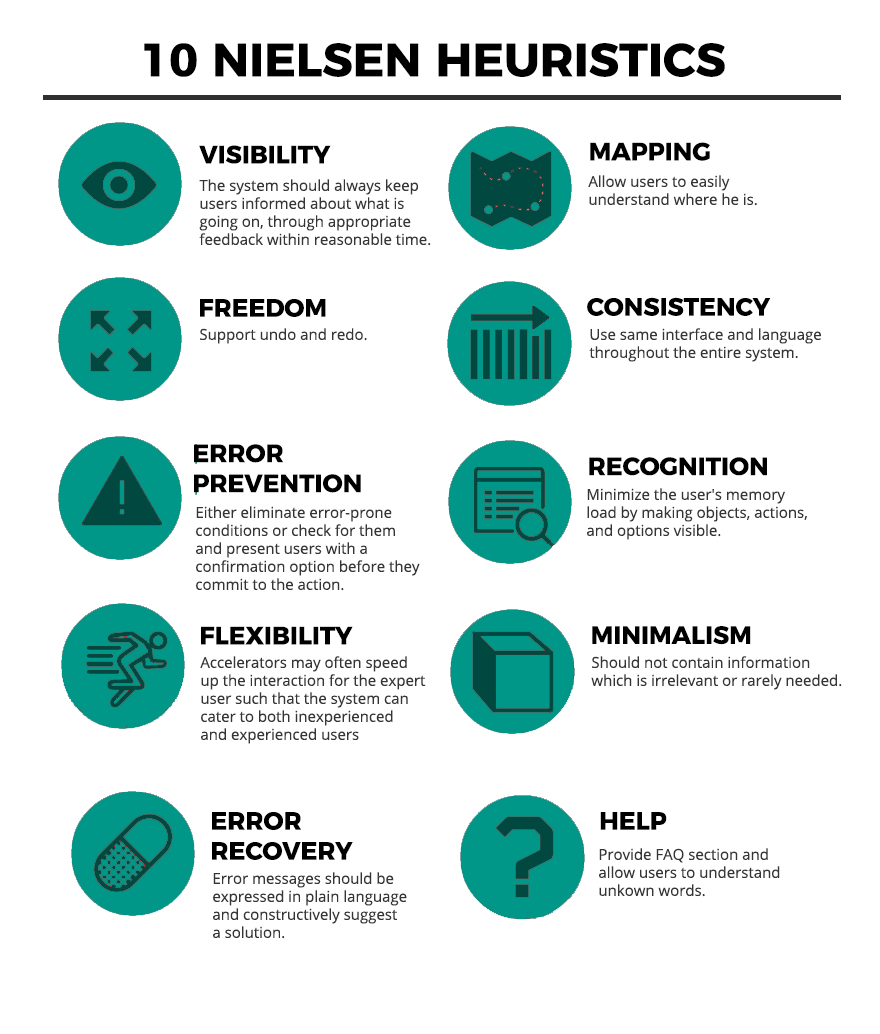
<style>
.page{position:relative;width:880px;height:1034px;background:#ffffff}
.page>*{position:absolute;margin:0}
.t1{font:47px "Montserrat-Bold";color:#000000}
.t2{font:25px "Montserrat-Bold";color:#000000}
.t3{font:15px/18px "OpenSans";color:#353535}
.t4{font:15px "OpenSans";color:#353535}
</style>
<div class="page">
<p class="t1" style="left:144px;top:43px;width:581px;height:34px">10 NIELSEN HEURISTICS</p>
<p class="t2" style="left:199px;top:145px;width:132px;height:19px">VISIBILITY</p>
<p class="t2" style="left:590px;top:142px;width:120px;height:19px">MAPPING</p>
<p class="t3" style="left:199px;top:179px;width:232px;height:67px">The system should always keep <br>users informed about what is <br>going on, through appropriate <br>feedback within reasonable time.</p>
<p class="t3" style="left:588px;top:175px;width:169px;height:31px">Allow users to easily <br>understand where he is.</p>
<p class="t2" style="left:200px;top:299px;width:126px;height:18px">FREEDOM</p>
<p class="t2" style="left:587px;top:297px;width:184px;height:19px">CONSISTENCY</p>
<p class="t4" style="left:200px;top:328px;width:167px;height:16px">Support undo and redo.</p>
<p class="t3" style="left:589px;top:328px;width:232px;height:34px">Use same interface and language <br>throughout the entire system.</p>
<p class="t2" style="left:194px;top:444px;width:167px;height:49px">ERROR <br>PREVENTION</p>
<p class="t2" style="left:589px;top:457px;width:178px;height:19px">RECOGNITION</p>
<p class="t3" style="left:587px;top:488px;width:220px;height:52px">Minimize the user's memory <br>load by making objects, actions, <br>and options visible.</p>
<p class="t3" style="left:196px;top:506px;width:224px;height:85px">Either eliminate error-prone <br>conditions or check for them <br>and present users with a <br>confirmation option before they <br>commit to the action.</p>
<p class="t2" style="left:201px;top:626px;width:152px;height:19px">FLEXIBILITY</p>
<p class="t2" style="left:592px;top:626px;width:159px;height:19px">MINIMALISM</p>
<p class="t3" style="left:200px;top:656px;width:226px;height:88px">Accelerators may often speed <br>up the interaction for the expert <br>user such that the system can <br>cater to both inexperienced <br>and experienced users</p>
<p class="t3" style="left:591px;top:656px;width:251px;height:34px">Should not contain information <br>which is irrelevant or rarely needed.</p>
<p class="t2" style="left:212px;top:812px;width:141px;height:48px">ERROR<br>RECOVERY</p>
<p class="t2" style="left:600px;top:812px;width:67px;height:18px">HELP</p>
<p class="t3" style="left:599px;top:848px;width:181px;height:49px">Provide FAQ section and<br>allow users to understand<br>unkown words.</p>
<p class="t3" style="left:213px;top:872px;width:194px;height:67px">Error messages should be <br>expressed in plain language <br>and constructively suggest <br>a solution.</p>
</div>
